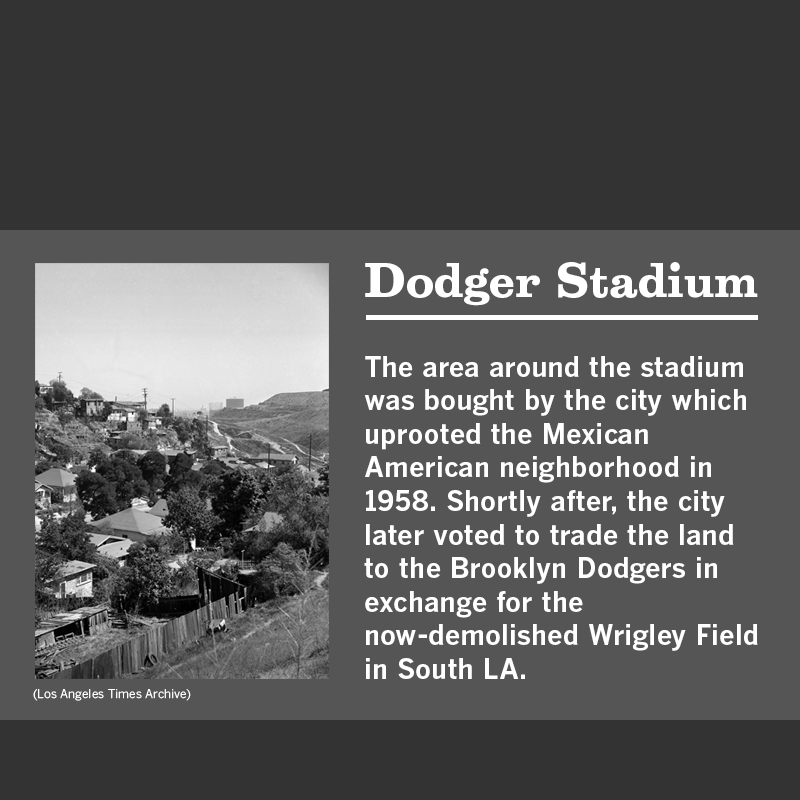
<style>
.page{position:relative;width:800px;height:800px;background:#333333}
.page>*{position:absolute;margin:0}
.t1{font:44px "Belizio-Bold";color:#ffffff}
.t2{font:28px "BentonGothic-Bold";color:#ffffff}
.t3{font:12px "BentonGothicTab-Regular";color:#ffffff}
</style>
<div class="page">
<p class="t1" style="left:365px;top:262px;width:393px;height:44px">Dodger Stadium</p>
<p class="t2" style="left:364px;top:356px;width:394px;height:323px">The area around the stadium was bought by the city which<br>uprooted the Mexican<br>American neighborhood in 1958. Shortly after, the city later voted to trade the land to the Brooklyn Dodgers in exchange for the<br>now-demolished Wrigley Field in South LA.</p>
<p class="t3" style="left:33px;top:689px;width:158px;height:12px">(Los Angeles Times Archive)</p>
</div>
